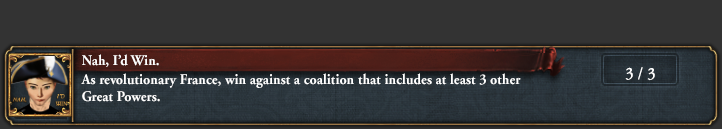
<style>
.page{position:relative;width:722px;height:129px;background:#333333}
.page>*{position:absolute;margin:0}
.t1{font:14.7px "AGaramond-Bold";letter-spacing:0.004em;color:#ffffff;scale:0.94 1}
.t2{font:17px "AGaramond-Regular";letter-spacing:-0.003em;color:#ffffff}
</style>
<div class="page">
<p class="t1" style="left:82px;top:54px;width:77px;height:13px">Nah, I’d Win.</p>
<p class="t1" style="left:81px;top:73px;width:440px;height:29px">As revolutionary France, win against a coalition that includes at least 3 other<br>Great Powers.</p>
<p class="t2" style="left:625px;top:67px;width:8px;height:13px">3</p>
<p class="t2" style="left:638px;top:67px;width:17px;height:14px">/ 3</p>
</div>
